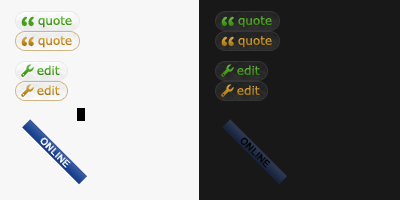
<style>
.page{position:relative;width:400px;height:200px;background:#f7f7f7}
.page>*{position:absolute;margin:0}
.t1{font:31.4px "ArialRoundedMTBold";color:#469f1a}
.t2{font:12px "Verdana";color:#469f1a}
.t3{font:31.4px "ArialRoundedMTBold";color:#c8901f}
.t4{font:12px "Verdana";color:#c8901f}
.t5{font:12px "Verdana"}
</style>
<div class="page">
<p class="t1" style="left:21px;top:16px;width:13px;height:11px;rotate:180deg">”</p>
<p class="t2" style="left:38px;top:16px;width:34px;height:12px">quote</p>
<p class="t1" style="left:221px;top:16px;width:13px;height:11px;rotate:180deg">”</p>
<p class="t2" style="left:238px;top:16px;width:34px;height:12px">quote</p>
<p class="t3" style="left:21px;top:36px;width:13px;height:11px;rotate:180deg">”</p>
<p class="t4" style="left:38px;top:36px;width:34px;height:12px">quote</p>
<p class="t3" style="left:221px;top:36px;width:13px;height:11px;rotate:180deg">”</p>
<p class="t4" style="left:238px;top:36px;width:34px;height:12px">quote</p>
<p class="t2" style="left:37px;top:65px;width:23px;height:10px">edit</p>
<p class="t2" style="left:237px;top:65px;width:23px;height:10px">edit</p>
<p class="t5" style="left:37px;top:85px;width:23px;height:10px">edit</p>
<p class="t4" style="left:237px;top:85px;width:23px;height:10px">edit</p>
</div>
